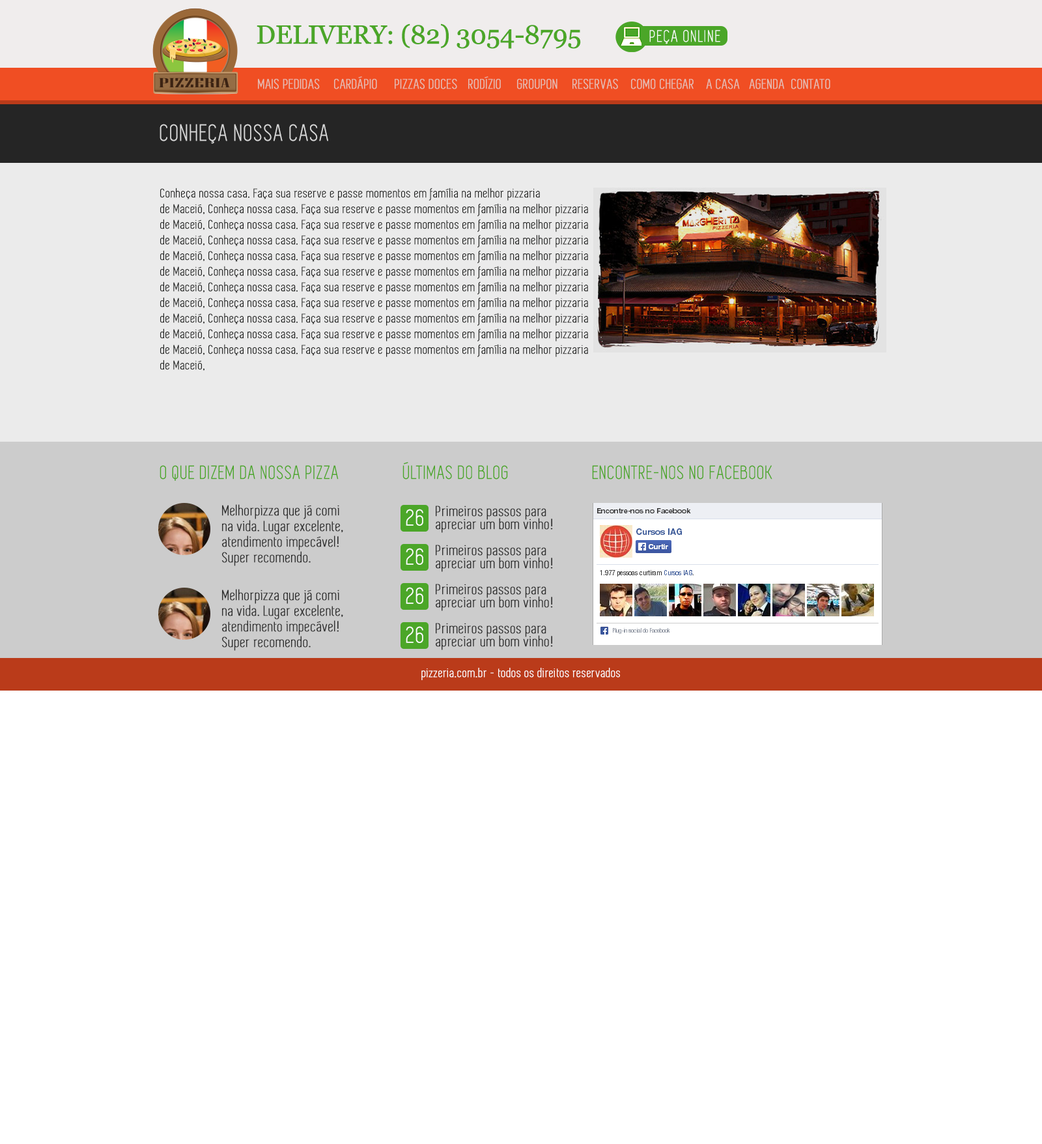
<style>
.page{position:relative;width:1042px;height:1144px;background:#ffffff}
.page>*{position:absolute;margin:0}
.t1{font:26.1px "Georgia";letter-spacing:-0.03em;color:#4ba628;font-weight:bold}
.t2{font:16.9px "Simplifica";letter-spacing:0.06em;color:#ffffff;font-weight:bold}
.t3{font:14.3px "Simplifica";letter-spacing:0.032em;color:#e4bdb3;font-weight:bold}
.t4{font:24.1px "Simplifica";letter-spacing:0.03em;color:#d7d7d7;font-weight:bold}
.t5{font:13px/15.6px "Simplifica";letter-spacing:0.03em;color:#212221;font-weight:bold}
.t6{font:19.5px "Simplifica";letter-spacing:0.03em;color:#4ba628;font-weight:bold}
.t7{font:15px/15.6px "Simplifica";letter-spacing:0.03em;color:#303030;font-weight:bold}
.t8{font:23.5px "Simplifica";letter-spacing:0.03em;color:#fefefe;font-weight:bold}
.t9{font:15px/13px "Simplifica";letter-spacing:0.03em;color:#303030;font-weight:bold}
.t10{font:13px "Simplifica";letter-spacing:0.03em;color:#ffffff;font-weight:bold}
</style>
<div class="page">
<p class="t1" style="left:257px;top:23px;width:324px;height:26px">DELIVERY: (82) 3054-8795</p>
<p class="t2" style="left:650px;top:30px;width:71px;height:14px">PEÇA ONLINE</p>
<p class="t3" style="left:334px;top:76px;width:43px;height:13px">CARDÁPIO</p>
<p class="t3" style="left:468px;top:76px;width:33px;height:13px">RODÍZIO</p>
<p class="t3" style="left:258px;top:79px;width:62px;height:10px">MAIS PEDIDAS</p>
<p class="t3" style="left:395px;top:79px;width:62px;height:10px">PIZZAS DOCES</p>
<p class="t3" style="left:517px;top:79px;width:41px;height:10px">GROUPON</p>
<p class="t3" style="left:573px;top:79px;width:45px;height:10px">RESERVAS</p>
<p class="t3" style="left:631px;top:79px;width:63px;height:10px">COMO CHEGAR</p>
<p class="t3" style="left:706px;top:79px;width:34px;height:10px">A CASA</p>
<p class="t3" style="left:749px;top:79px;width:36px;height:10px">AGENDA</p>
<p class="t3" style="left:792px;top:79px;width:39px;height:10px">CONTATO</p>
<p class="t4" style="left:160px;top:124px;width:168px;height:20px">CONHEÇA NOSSA CASA</p>
<p class="t5" style="left:160px;top:188px;width:428px;height:183px">Conheça nossa casa. Faça sua reserve e passe momentos em família na melhor pizzaria<br>de Maceió, Conheça nossa casa. Faça sua reserve e passe momentos em família na melhor pizzaria<br>de Maceió, Conheça nossa casa. Faça sua reserve e passe momentos em família na melhor pizzaria<br>de Maceió, Conheça nossa casa. Faça sua reserve e passe momentos em família na melhor pizzaria<br>de Maceió, Conheça nossa casa. Faça sua reserve e passe momentos em família na melhor pizzaria<br>de Maceió, Conheça nossa casa. Faça sua reserve e passe momentos em família na melhor pizzaria<br>de Maceió, Conheça nossa casa. Faça sua reserve e passe momentos em família na melhor pizzaria<br>de Maceió, Conheça nossa casa. Faça sua reserve e passe momentos em família na melhor pizzaria<br>de Maceió, Conheça nossa casa. Faça sua reserve e passe momentos em família na melhor pizzaria<br>de Maceió, Conheça nossa casa. Faça sua reserve e passe momentos em família na melhor pizzaria<br>de Maceió, Conheça nossa casa. Faça sua reserve e passe momentos em família na melhor pizzaria<br>de Maceió,</p>
<p class="t6" style="left:403px;top:462px;width:105px;height:17px">ÚLTIMAS DO BLOG</p>
<p class="t6" style="left:160px;top:465px;width:179px;height:16px">O QUE DIZEM DA NOSSA PIZZA</p>
<p class="t6" style="left:592px;top:465px;width:181px;height:14px">ENCONTRE-NOS NO FACEBOOK</p>
<p class="t7" style="left:222px;top:504px;width:121px;height:62px">Melhorpizza que já comi<br>na vida. Lugar excelente,<br>atendimento impecável!<br>Super recomendo.</p>
<p class="t8" style="left:406px;top:509px;width:17px;height:17px">26</p>
<p class="t9" style="left:436px;top:506px;width:117px;height:27px">Primeiros passos para<br>apreciar um bom vinho!</p>
<p class="t9" style="left:436px;top:545px;width:117px;height:27px">Primeiros passos para<br>apreciar um bom vinho!</p>
<p class="t8" style="left:406px;top:548px;width:17px;height:17px">26</p>
<p class="t7" style="left:222px;top:589px;width:121px;height:62px">Melhorpizza que já comi<br>na vida. Lugar excelente,<br>atendimento impecável!<br>Super recomendo.</p>
<p class="t8" style="left:406px;top:587px;width:17px;height:17px">26</p>
<p class="t9" style="left:436px;top:584px;width:117px;height:27px">Primeiros passos para<br>apreciar um bom vinho!</p>
<p class="t8" style="left:406px;top:626px;width:17px;height:17px">26</p>
<p class="t9" style="left:436px;top:623px;width:117px;height:27px">Primeiros passos para<br>apreciar um bom vinho!</p>
<p class="t10" style="left:422px;top:668px;width:198px;height:12px">pizzeria.com.br - todos os direitos reservados</p>
</div>
